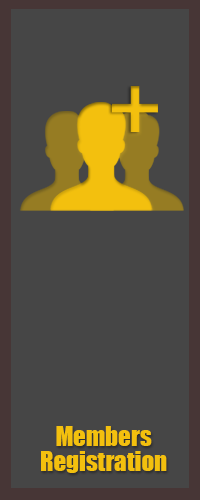
<style>
.page{position:relative;width:200px;height:500px;background:#464646}
.page>*{position:absolute;margin:0}
.t1{font:25px/25px "Impact";color:#f3c00e}
</style>
<div class="page">
<p class="t1" style="left:41px;top:426px;width:126px;height:47px;text-align:center">Members <br>Registration</p>
</div>
